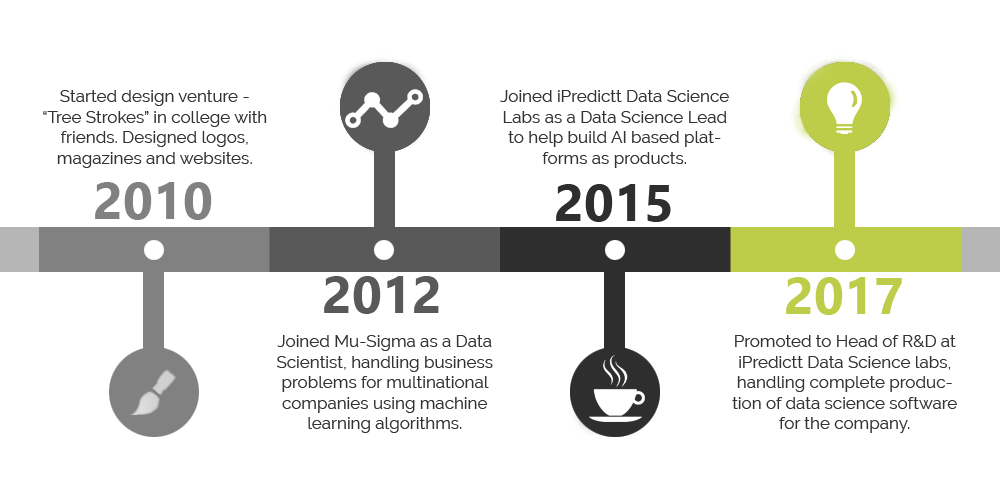
<style>
.page{position:relative;width:1000px;height:500px;background:#ffffff}
.page>*{position:absolute;margin:0}
.t1{font:17px "Raleway-Regular";color:#333333}
.t2{font:52px "SegoeUI-Bold";color:#818181}
.t3{font:52px "SegoeUI-Bold";color:#2e2e2e}
.t4{font:52px "SegoeUI-Bold";color:#595959}
.t5{font:52px "SegoeUI-Bold";color:#bdcd49}
</style>
<div class="page">
<p class="t1" style="left:43px;top:90px;width:224px;height:78px;text-align:center">Started design venture - “Tree Strokes” in college with friends. Designed logos, magazines and websites.</p>
<p class="t1" style="left:500px;top:90px;width:229px;height:78px;text-align:center">Joined iPredictt Data Science Labs as a Data Science Lead  to help build AI based platforms as products.</p>
<p class="t2" style="left:95px;top:182px;width:117px;height:38px">2010</p>
<p class="t3" style="left:556px;top:184px;width:115px;height:38px">2015</p>
<p class="t4" style="left:324px;top:276px;width:115px;height:38px">2012</p>
<p class="t5" style="left:786px;top:277px;width:116px;height:38px">2017</p>
<p class="t1" style="left:276px;top:335px;width:217px;height:98px;text-align:center">Joined Mu-Sigma as a Data Scientist, handling business problems for multinational companies using machine learning algorithms.</p>
<p class="t1" style="left:732px;top:335px;width:225px;height:98px;text-align:center">Promoted to Head of R&amp;D at iPredictt Data Science labs, handling complete production of data science software for the company.</p>
</div>
